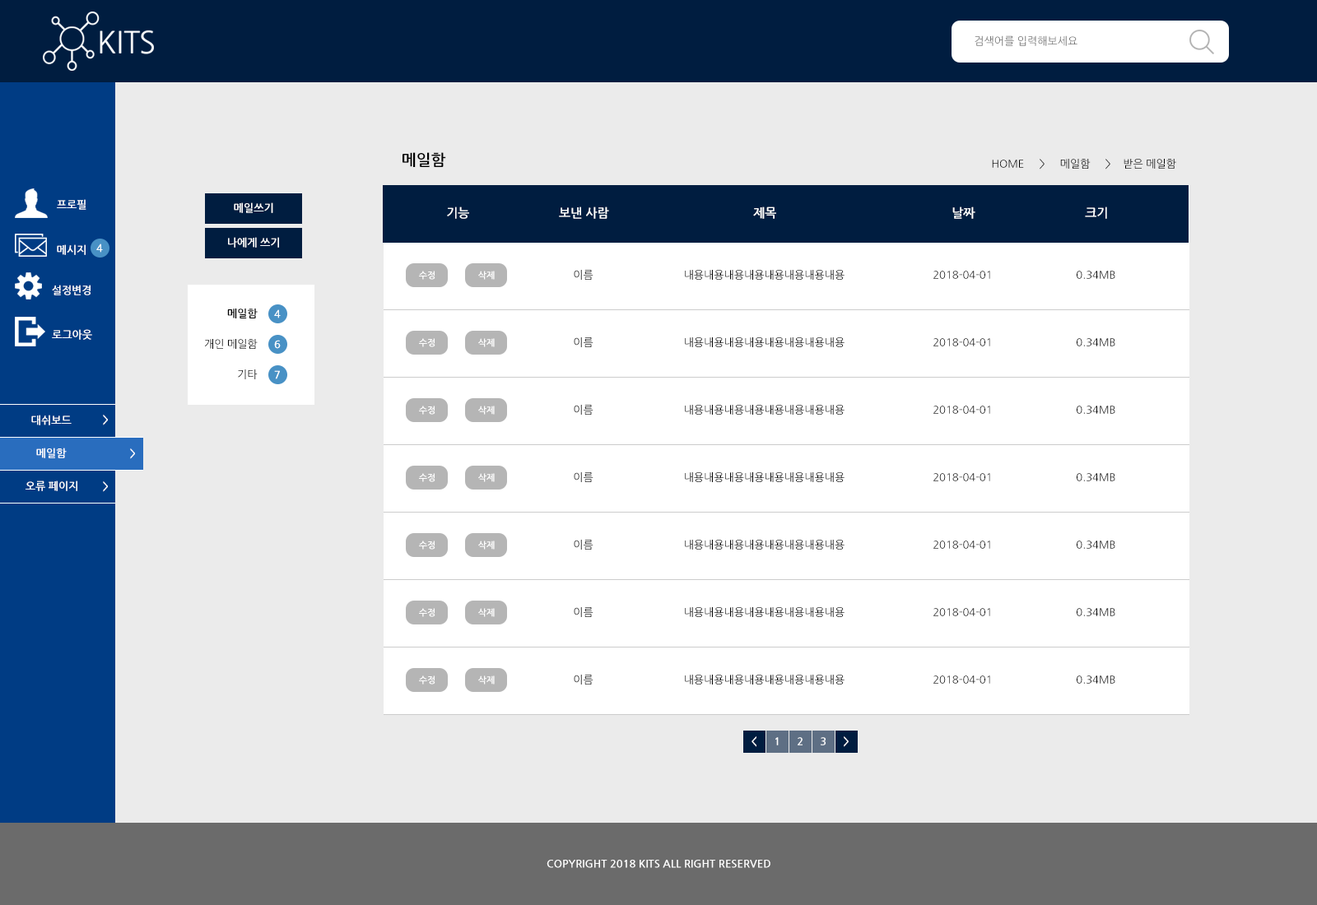
<style>
.page{position:relative;width:1317px;height:905px;background:#ebebeb}
.page>*{position:absolute;margin:0}
.t1{font:10.7px "NanumGothic";color:#737373;text-transform:uppercase}
.t2{font:15.6px "NanumGothicBold";color:#000000;text-transform:uppercase}
.t3{font:10.7px "NanumGothic";color:#000000;text-transform:uppercase}
.t4{font:10.7px "NanumGothicBold";color:#ffffff;text-transform:uppercase}
.t5{font:12.3px "NanumGothicBold";color:#ffffff;text-transform:uppercase}
.t6{font:10.7px "NanumGothic";text-transform:uppercase}
.t7{font:9.1px "NanumGothicBold";color:#ffffff;text-transform:uppercase}
.t8{font:10.7px "NanumGothicBold";color:#000000;text-transform:uppercase}
</style>
<div class="page">
<p class="t1" style="left:975px;top:35px;width:102px;height:11px">검색어를 입력해보세요</p>
<p class="t2" style="left:403px;top:152px;width:43px;height:15px">메일함</p>
<p class="t3" style="left:992px;top:159px;width:184px;height:11px">home     &gt;     메일함     &gt;    받은 메일함</p>
<p class="t4" style="left:57px;top:199px;width:29px;height:11px">프로필</p>
<p class="t4" style="left:234px;top:202px;width:39px;height:11px">메일쓰기</p>
<p class="t5" style="left:447px;top:207px;width:22px;height:12px">기능</p>
<p class="t5" style="left:559px;top:207px;width:50px;height:12px">보낸 사람</p>
<p class="t5" style="left:753px;top:207px;width:23px;height:12px">제목</p>
<p class="t5" style="left:952px;top:207px;width:23px;height:12px">날짜</p>
<p class="t5" style="left:1085px;top:207px;width:22px;height:12px">크기</p>
<p class="t4" style="left:57px;top:244px;width:29px;height:11px">메시지</p>
<p class="t4" style="left:96px;top:244px;width:7px;height:9px">4</p>
<p class="t4" style="left:228px;top:237px;width:51px;height:11px">나에게 쓰기</p>
<p class="t6" style="left:574px;top:270px;width:19px;height:10px">이름</p>
<p class="t3" style="left:685px;top:270px;width:160px;height:10px">내용내용내용내용내용내용내용내용</p>
<p class="t7" style="left:419px;top:271px;width:16px;height:9px">수정</p>
<p class="t7" style="left:478px;top:271px;width:17px;height:9px">삭제</p>
<p class="t3" style="left:933px;top:271px;width:57px;height:8px">2018-04-01</p>
<p class="t3" style="left:1077px;top:271px;width:38px;height:8px">0.34mb</p>
<p class="t4" style="left:52px;top:285px;width:39px;height:10px">설정변경</p>
<p class="t8" style="left:227px;top:309px;width:31px;height:10px">메일함</p>
<p class="t4" style="left:274px;top:309px;width:7px;height:10px">4</p>
<p class="t4" style="left:52px;top:329px;width:40px;height:11px">로그아웃</p>
<p class="t3" style="left:205px;top:339px;width:53px;height:10px">개인 메일함</p>
<p class="t4" style="left:274px;top:340px;width:7px;height:9px">6</p>
<p class="t7" style="left:419px;top:338px;width:16px;height:9px">수정</p>
<p class="t7" style="left:478px;top:338px;width:17px;height:9px">삭제</p>
<p class="t6" style="left:574px;top:337px;width:19px;height:10px">이름</p>
<p class="t3" style="left:685px;top:337px;width:160px;height:10px">내용내용내용내용내용내용내용내용</p>
<p class="t3" style="left:933px;top:338px;width:57px;height:9px">2018-04-01</p>
<p class="t3" style="left:1077px;top:338px;width:38px;height:9px">0.34mb</p>
<p class="t6" style="left:238px;top:370px;width:20px;height:9px">기타</p>
<p class="t4" style="left:274px;top:370px;width:6px;height:9px">7</p>
<p class="t7" style="left:419px;top:406px;width:16px;height:9px">수정</p>
<p class="t7" style="left:478px;top:406px;width:17px;height:9px">삭제</p>
<p class="t6" style="left:574px;top:405px;width:19px;height:10px">이름</p>
<p class="t3" style="left:685px;top:405px;width:160px;height:10px">내용내용내용내용내용내용내용내용</p>
<p class="t3" style="left:933px;top:406px;width:57px;height:8px">2018-04-01</p>
<p class="t3" style="left:1077px;top:406px;width:38px;height:8px">0.34mb</p>
<p class="t4" style="left:31px;top:415px;width:41px;height:11px">대쉬보드</p>
<p class="t4" style="left:103px;top:415px;width:5px;height:11px">&gt;</p>
<p class="t4" style="left:36px;top:448px;width:31px;height:10px">메일함</p>
<p class="t4" style="left:130px;top:449px;width:5px;height:10px">&gt;</p>
<p class="t7" style="left:419px;top:473px;width:16px;height:9px">수정</p>
<p class="t7" style="left:478px;top:473px;width:17px;height:9px">삭제</p>
<p class="t6" style="left:574px;top:472px;width:19px;height:10px">이름</p>
<p class="t3" style="left:685px;top:472px;width:160px;height:10px">내용내용내용내용내용내용내용내용</p>
<p class="t3" style="left:933px;top:473px;width:57px;height:9px">2018-04-01</p>
<p class="t3" style="left:1077px;top:473px;width:38px;height:9px">0.34mb</p>
<p class="t4" style="left:26px;top:481px;width:51px;height:10px">오류 페이지</p>
<p class="t4" style="left:103px;top:482px;width:5px;height:10px">&gt;</p>
<p class="t7" style="left:419px;top:541px;width:16px;height:9px">수정</p>
<p class="t7" style="left:478px;top:541px;width:17px;height:9px">삭제</p>
<p class="t6" style="left:574px;top:540px;width:19px;height:10px">이름</p>
<p class="t3" style="left:685px;top:540px;width:160px;height:10px">내용내용내용내용내용내용내용내용</p>
<p class="t3" style="left:933px;top:541px;width:57px;height:8px">2018-04-01</p>
<p class="t3" style="left:1077px;top:541px;width:38px;height:8px">0.34mb</p>
<p class="t7" style="left:419px;top:608px;width:16px;height:9px">수정</p>
<p class="t7" style="left:478px;top:608px;width:17px;height:9px">삭제</p>
<p class="t6" style="left:574px;top:607px;width:19px;height:10px">이름</p>
<p class="t3" style="left:685px;top:607px;width:160px;height:10px">내용내용내용내용내용내용내용내용</p>
<p class="t3" style="left:933px;top:608px;width:57px;height:9px">2018-04-01</p>
<p class="t3" style="left:1077px;top:608px;width:38px;height:9px">0.34mb</p>
<p class="t7" style="left:419px;top:676px;width:16px;height:9px">수정</p>
<p class="t7" style="left:478px;top:676px;width:17px;height:9px">삭제</p>
<p class="t6" style="left:574px;top:675px;width:19px;height:10px">이름</p>
<p class="t3" style="left:685px;top:675px;width:160px;height:10px">내용내용내용내용내용내용내용내용</p>
<p class="t3" style="left:933px;top:676px;width:57px;height:8px">2018-04-01</p>
<p class="t3" style="left:1077px;top:676px;width:38px;height:8px">0.34mb</p>
<p class="t4" style="left:752px;top:737px;width:4px;height:10px">&lt;</p>
<p class="t4" style="left:775px;top:738px;width:4px;height:8px">1</p>
<p class="t4" style="left:798px;top:738px;width:5px;height:8px">2</p>
<p class="t4" style="left:821px;top:738px;width:5px;height:8px">3</p>
<p class="t4" style="left:844px;top:737px;width:5px;height:10px">&gt;</p>
<p class="t4" style="left:547px;top:860px;width:223px;height:8px">copyright 2018 kits all right reserved</p>
</div>
